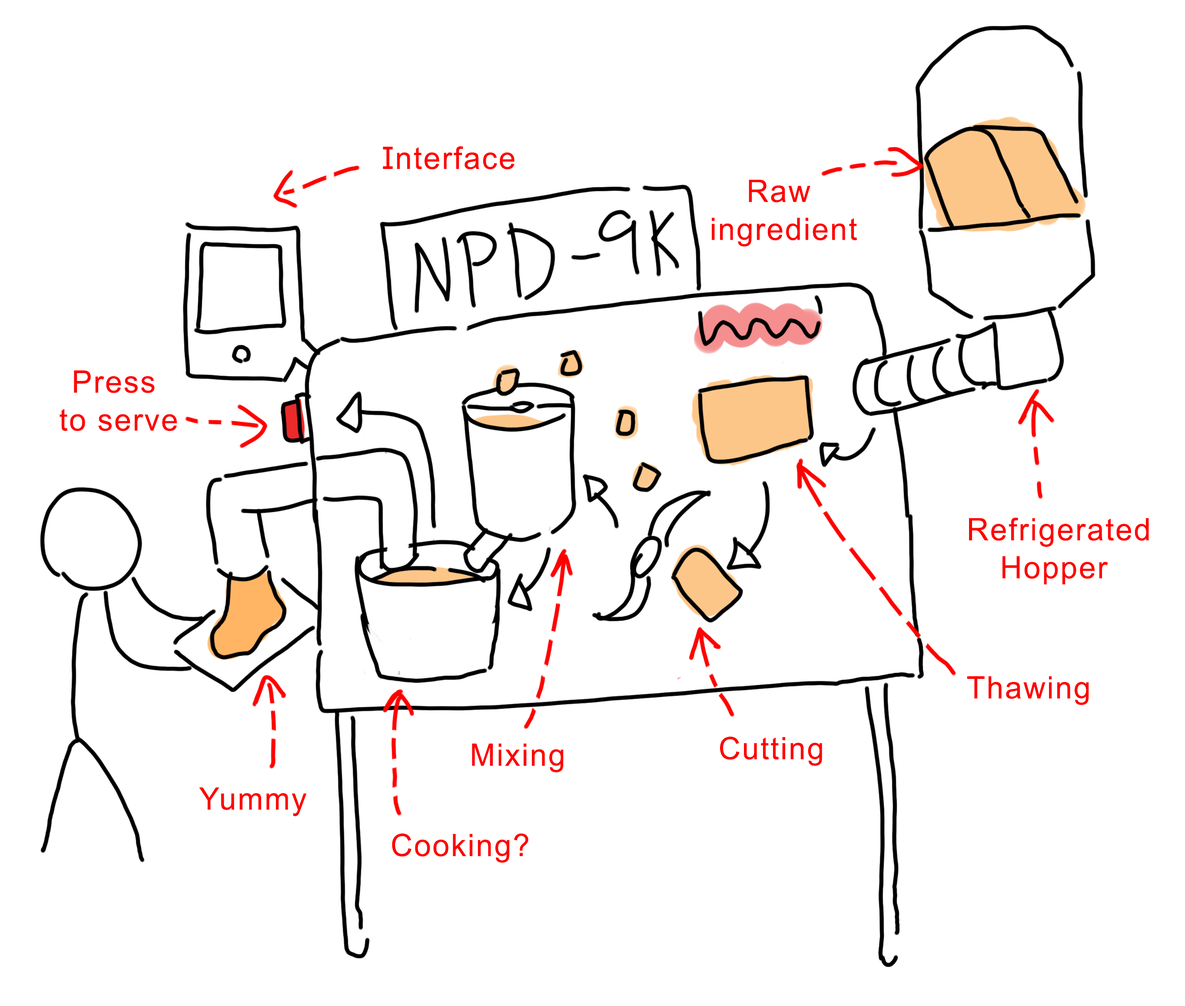
<style>
.page{position:relative;width:1185px;height:1006px;background:#ffffff}
.page>*{position:absolute;margin:0}
.t1{font:31px "ArialMT";letter-spacing:0.05em;color:#ff0000}
.t2{font:31px/38px "ArialMT";letter-spacing:0.05em;color:#ff0000}
</style>
<div class="page">
<p class="t1" style="left:383px;top:146px;width:131px;height:23px">Interface</p>
<p class="t2" style="left:712px;top:179px;width:145px;height:68px;text-align:center">Raw <br>ingredient</p>
<p class="t2" style="left:60px;top:370px;width:117px;height:61px;text-align:center">Press <br>to serve</p>
<p class="t2" style="left:969px;top:518px;width:180px;height:67px;text-align:center">Refrigerated<br>Hopper</p>
<p class="t1" style="left:967px;top:676px;width:122px;height:29px">Thawing</p>
<p class="t1" style="left:720px;top:737px;width:102px;height:29px">Cutting</p>
<p class="t1" style="left:472px;top:743px;width:92px;height:30px">Mixing</p>
<p class="t1" style="left:199px;top:787px;width:108px;height:29px">Yummy</p>
<p class="t1" style="left:392px;top:833px;width:136px;height:30px">Cooking?</p>
</div>
